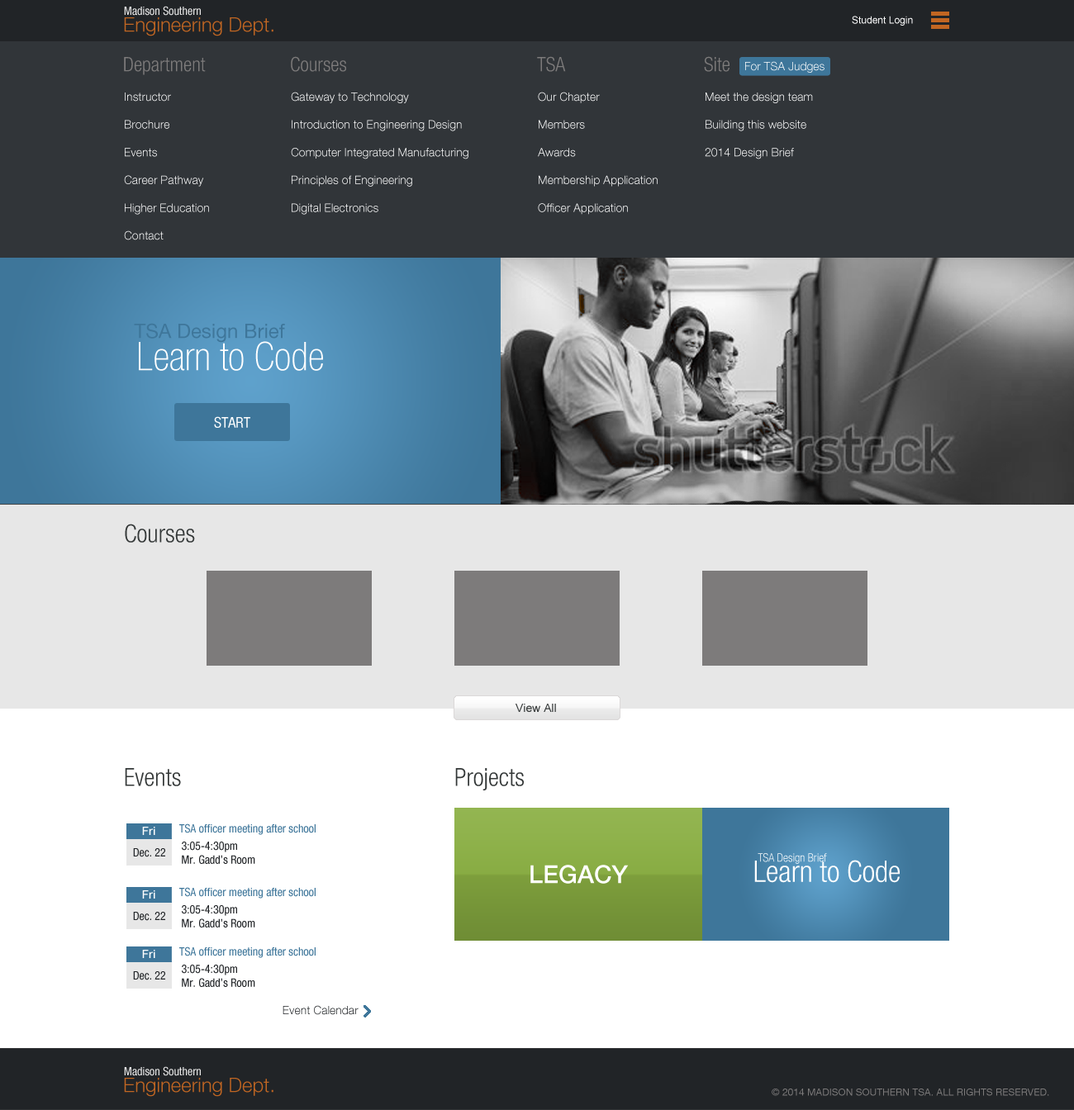
<style>
.page{position:relative;width:1074px;height:1110px;background:#ffffff}
.page>*{position:absolute;margin:0}
.t1{font:11.6px "HelveticaNeueLTCom-Cn";color:#e7e7e7}
.t2{font:19.8px "HelveticaNeueLTCom-Lt";color:#c16622}
.t3{font:9.9px "ArialMT";color:#ffffff}
.t4{font:19.8px "HelveticaNeueLTCom-LtCn";color:#7d7b7b}
.t5{font:11.6px "HelveticaNeueLTCom-Lt";color:#ffffff}
.t6{font:19.8px "HelveticaNeueLTCom-Roman";color:#3e769a}
.t7{font:39.7px "HelveticaNeueLTCom-ThCn";color:#ffffff}
.t8{font:14.9px "HelveticaNeueLTCom-Cn";color:#ffffff}
.t9{font:24.8px "HelveticaNeueLTCom-LtCn";color:#343838}
.t10{font:11.6px "ArialMT";color:#343838}
.t11{font:11.6px "HelveticaNeueLTCom-Md";color:#ffffff}
.t12{font:11.6px "HelveticaNeueLTCom-Cn";color:#3e769a}
.t13{font:11.6px "HelveticaNeueLTCom-Cn";color:#212427}
.t14{font:11.6px "HelveticaNeueLTCom-LtCn"}
.t15{font:24.8px "HelveticaNeueLTCom-Md";color:#ffffff}
.t16{font:29.7px "HelveticaNeueLTCom-LtCn";color:#ffffff}
.t17{font:11.6px "HelveticaNeueLTCom-Lt";color:#212427}
.t18{font:9.9px "HelveticaNeueLTCom-Roman";color:#7d7b7b}
</style>
<div class="page">
<p class="t1" style="left:124px;top:6px;width:77px;height:10px">Madison Southern</p>
<p class="t2" style="left:124px;top:17px;width:149px;height:19px">Engineering Dept.</p>
<p class="t3" style="left:852px;top:16px;width:61px;height:10px">Student Login</p>
<p class="t4" style="left:124px;top:57px;width:82px;height:18px">Department</p>
<p class="t4" style="left:291px;top:56px;width:55px;height:16px">Courses</p>
<p class="t4" style="left:537px;top:56px;width:29px;height:16px">TSA</p>
<p class="t4" style="left:704px;top:56px;width:25px;height:16px">Site</p>
<p class="t5" style="left:745px;top:61px;width:79px;height:12px">For TSA Judges</p>
<p class="t5" style="left:124px;top:93px;width:85px;height:147px">Instructor<br><br>Brochure<br><br>Events<br><br>Career Pathway<br><br>Higher Education<br><br>Contact</p>
<p class="t5" style="left:291px;top:92px;width:177px;height:123px">Gateway to Technology<br><br>Introduction to Engineering Design<br><br>Computer Integrated Manufacturing<br><br>Principles of Engineering<br><br>Digital Electronics</p>
<p class="t5" style="left:538px;top:92px;width:120px;height:123px">Our Chapter<br><br>Members<br><br>Awards<br><br>Membership Application<br><br>Officer Application</p>
<p class="t5" style="left:705px;top:93px;width:108px;height:66px">Meet the design team<br><br>Building this website<br><br>2014 Design Brief</p>
<p class="t6" style="left:134px;top:323px;width:151px;height:20px">TSA Design Brief</p>
<p class="t7" style="left:139px;top:341px;width:184px;height:30px">Learn to Code</p>
<p class="t8" style="left:214px;top:416px;width:36px;height:12px">START</p>
<p class="t9" style="left:125px;top:524px;width:70px;height:19px">Courses</p>
<p class="t10" style="left:516px;top:704px;width:40px;height:8px">View All</p>
<p class="t9" style="left:125px;top:768px;width:56px;height:18px">Events</p>
<p class="t9" style="left:455px;top:768px;width:69px;height:23px">Projects</p>
<p class="t11" style="left:142px;top:827px;width:13px;height:8px">Fri</p>
<p class="t12" style="left:179px;top:824px;width:137px;height:11px">TSA officer meeting after school</p>
<p class="t13" style="left:182px;top:842px;width:73px;height:22px">3:05-4:30pm<br>Mr. Gadd’s Room</p>
<p class="t13" style="left:133px;top:848px;width:32px;height:10px">Dec. 22</p>
<p class="t14" style="left:758px;top:853px;width:69px;height:11px">TSA Design Brief</p>
<p class="t15" style="left:530px;top:865px;width:99px;height:19px">LEGACY</p>
<p class="t16" style="left:754px;top:860px;width:146px;height:23px">Learn to Code</p>
<p class="t11" style="left:142px;top:891px;width:13px;height:8px">Fri</p>
<p class="t12" style="left:179px;top:887px;width:137px;height:12px">TSA officer meeting after school</p>
<p class="t13" style="left:182px;top:905px;width:73px;height:23px">3:05-4:30pm<br>Mr. Gadd’s Room</p>
<p class="t13" style="left:133px;top:912px;width:32px;height:9px">Dec. 22</p>
<p class="t11" style="left:142px;top:950px;width:13px;height:8px">Fri</p>
<p class="t12" style="left:179px;top:947px;width:137px;height:11px">TSA officer meeting after school</p>
<p class="t13" style="left:182px;top:965px;width:73px;height:22px">3:05-4:30pm<br>Mr. Gadd’s Room</p>
<p class="t13" style="left:133px;top:972px;width:32px;height:9px">Dec. 22</p>
<p class="t17" style="left:283px;top:1005px;width:76px;height:10px">Event Calendar</p>
<p class="t1" style="left:124px;top:1067px;width:77px;height:9px">Madison Southern</p>
<p class="t2" style="left:124px;top:1078px;width:149px;height:19px">Engineering Dept.</p>
<p class="t18" style="left:772px;top:1089px;width:277px;height:7px">© 2014 MADISON SOUTHERN TSA. ALL RIGHTS RESERVED.</p>
</div>
